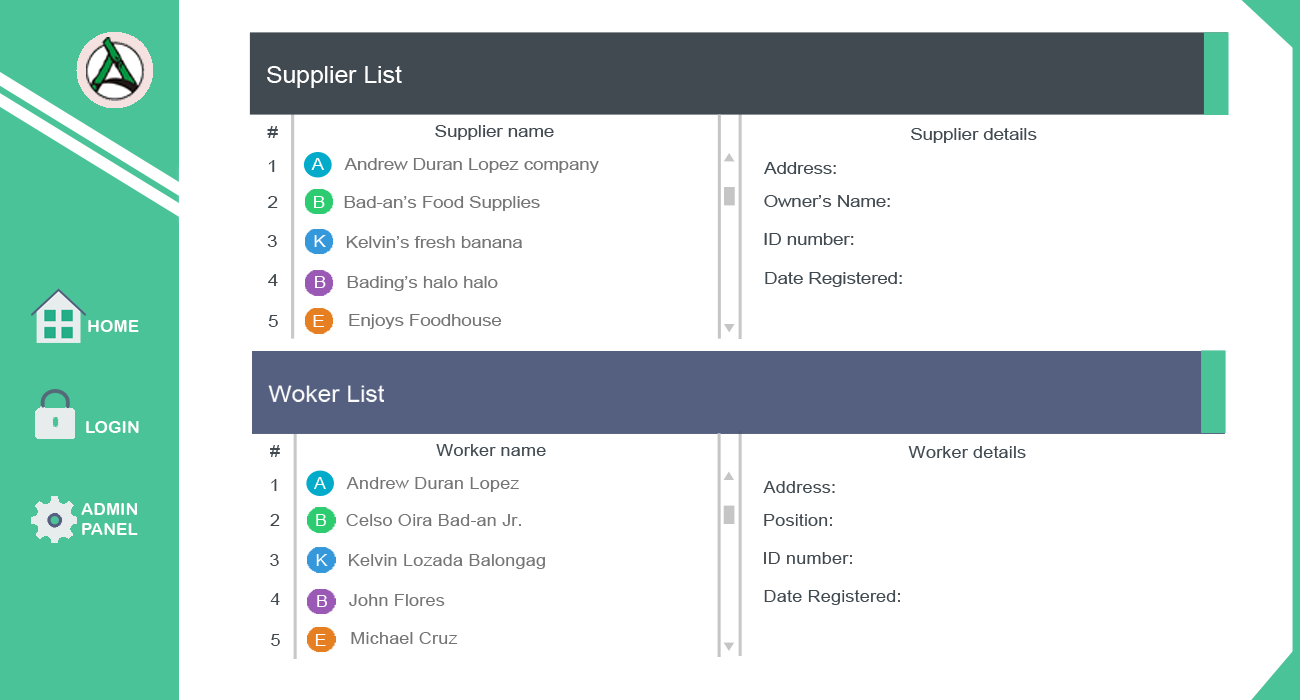
<style>
.page{position:relative;width:1300px;height:700px;background:#ffffff}
.page>*{position:absolute;margin:0}
.t1{font:22.7px "ArialMT";color:#ffffff;scale:1.09 1}
.t2{font:17px "ArialMT";color:#414a50;scale:1.09 1}
.t3{font:17px "ArialMT";color:#ffffff;scale:1.09 1}
.t4{font:17px "ArialMT";color:#757575;scale:1.09 1}
.t5{font:17.1px "ArialRoundedMTBold";color:#ffffff}
.t6{font:17px "ArialMT";color:#414a50;scale:1.08 1}
.t7{font:17px "ArialMT";color:#ffffff;scale:1.08 1}
.t8{font:17px "ArialMT";color:#757575;scale:1.08 1}
</style>
<div class="page">
<p class="t1" style="left:267px;top:66px;width:135px;height:22px">Supplier List</p>
<p class="t2" style="left:267px;top:126px;width:11px;height:12px">#</p>
<p class="t2" style="left:435px;top:125px;width:119px;height:15px">Supplier name</p>
<p class="t2" style="left:911px;top:128px;width:126px;height:15px">Supplier details</p>
<p class="t2" style="left:268px;top:160px;width:7px;height:12px">1</p>
<p class="t3" style="left:311px;top:158px;width:13px;height:12px">A</p>
<p class="t4" style="left:344px;top:158px;width:255px;height:15px">Andrew Duran Lopez company</p>
<p class="t2" style="left:764px;top:162px;width:72px;height:12px">Address:</p>
<p class="t2" style="left:268px;top:196px;width:10px;height:12px">2</p>
<p class="t3" style="left:314px;top:196px;width:11px;height:12px">B</p>
<p class="t4" style="left:344px;top:196px;width:196px;height:15px">Bad-an’s Food Supplies</p>
<p class="t2" style="left:764px;top:195px;width:126px;height:12px">Owner’s Name:</p>
<p class="t2" style="left:764px;top:233px;width:90px;height:12px">ID number:</p>
<p class="t2" style="left:267px;top:235px;width:10px;height:12px">3</p>
<p class="t3" style="left:314px;top:235px;width:12px;height:12px">K</p>
<p class="t4" style="left:346px;top:236px;width:176px;height:12px">Kelvin’s fresh banana</p>
<p class="t2" style="left:268px;top:274px;width:10px;height:12px">4</p>
<p class="t3" style="left:315px;top:276px;width:11px;height:12px">B</p>
<p class="t4" style="left:347px;top:276px;width:151px;height:15px">Bading’s halo halo</p>
<p class="t2" style="left:765px;top:272px;width:137px;height:15px">Date Registered:</p>
<p class="t2" style="left:268px;top:315px;width:10px;height:12px">5</p>
<p class="t3" style="left:313px;top:315px;width:11px;height:12px">E</p>
<p class="t4" style="left:349px;top:314px;width:153px;height:15px">Enjoys Foodhouse</p>
<p class="t5" style="left:88px;top:320px;width:51px;height:12px">HOME</p>
<p class="t5" style="left:86px;top:421px;width:53px;height:12px">LOGIN</p>
<p class="t6" style="left:270px;top:445px;width:10px;height:12px">#</p>
<p class="t6" style="left:436px;top:444px;width:110px;height:12px">Worker name</p>
<p class="t6" style="left:271px;top:479px;width:6px;height:12px">1</p>
<p class="t7" style="left:314px;top:477px;width:12px;height:12px">A</p>
<p class="t8" style="left:346px;top:477px;width:173px;height:15px">Andrew Duran Lopez</p>
<p class="t6" style="left:763px;top:481px;width:72px;height:12px">Address:</p>
<p class="t5" style="left:81px;top:503px;width:57px;height:32px">ADMIN<br>PANEL</p>
<p class="t6" style="left:270px;top:514px;width:10px;height:12px">2</p>
<p class="t7" style="left:316px;top:514px;width:10px;height:12px">B</p>
<p class="t8" style="left:346px;top:514px;width:175px;height:12px">Celso Oira Bad-an Jr.</p>
<p class="t6" style="left:764px;top:514px;width:68px;height:12px">Position:</p>
<p class="t6" style="left:270px;top:554px;width:9px;height:12px">3</p>
<p class="t7" style="left:316px;top:554px;width:12px;height:12px">K</p>
<p class="t8" style="left:349px;top:554px;width:196px;height:15px">Kelvin Lozada Balongag</p>
<p class="t6" style="left:764px;top:552px;width:88px;height:12px">ID number:</p>
<p class="t6" style="left:270px;top:593px;width:10px;height:12px">4</p>
<p class="t6" style="left:764px;top:590px;width:136px;height:15px">Date Registered:</p>
<p class="t7" style="left:317px;top:595px;width:10px;height:12px">B</p>
<p class="t8" style="left:349px;top:594px;width:96px;height:12px">John Flores</p>
<p class="t6" style="left:271px;top:634px;width:9px;height:12px">5</p>
<p class="t7" style="left:315px;top:634px;width:11px;height:12px">E</p>
<p class="t8" style="left:351px;top:632px;width:107px;height:12px">Michael Cruz</p>
</div>
